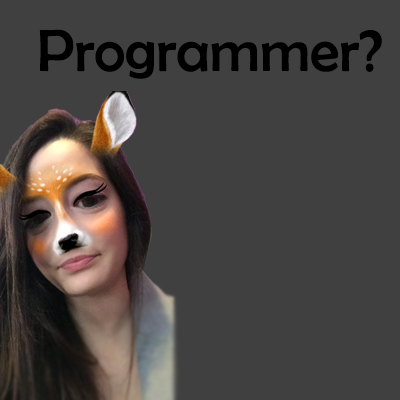
<style>
.page{position:relative;width:400px;height:400px;background:#404040}
.page>*{position:absolute;margin:0}
.t1{font:60px "BerlinSansFB-Reg";color:#000000}
</style>
<div class="page">
<p class="t1" style="left:39px;top:29px;width:343px;height:50px">Programmer?</p>
</div>
